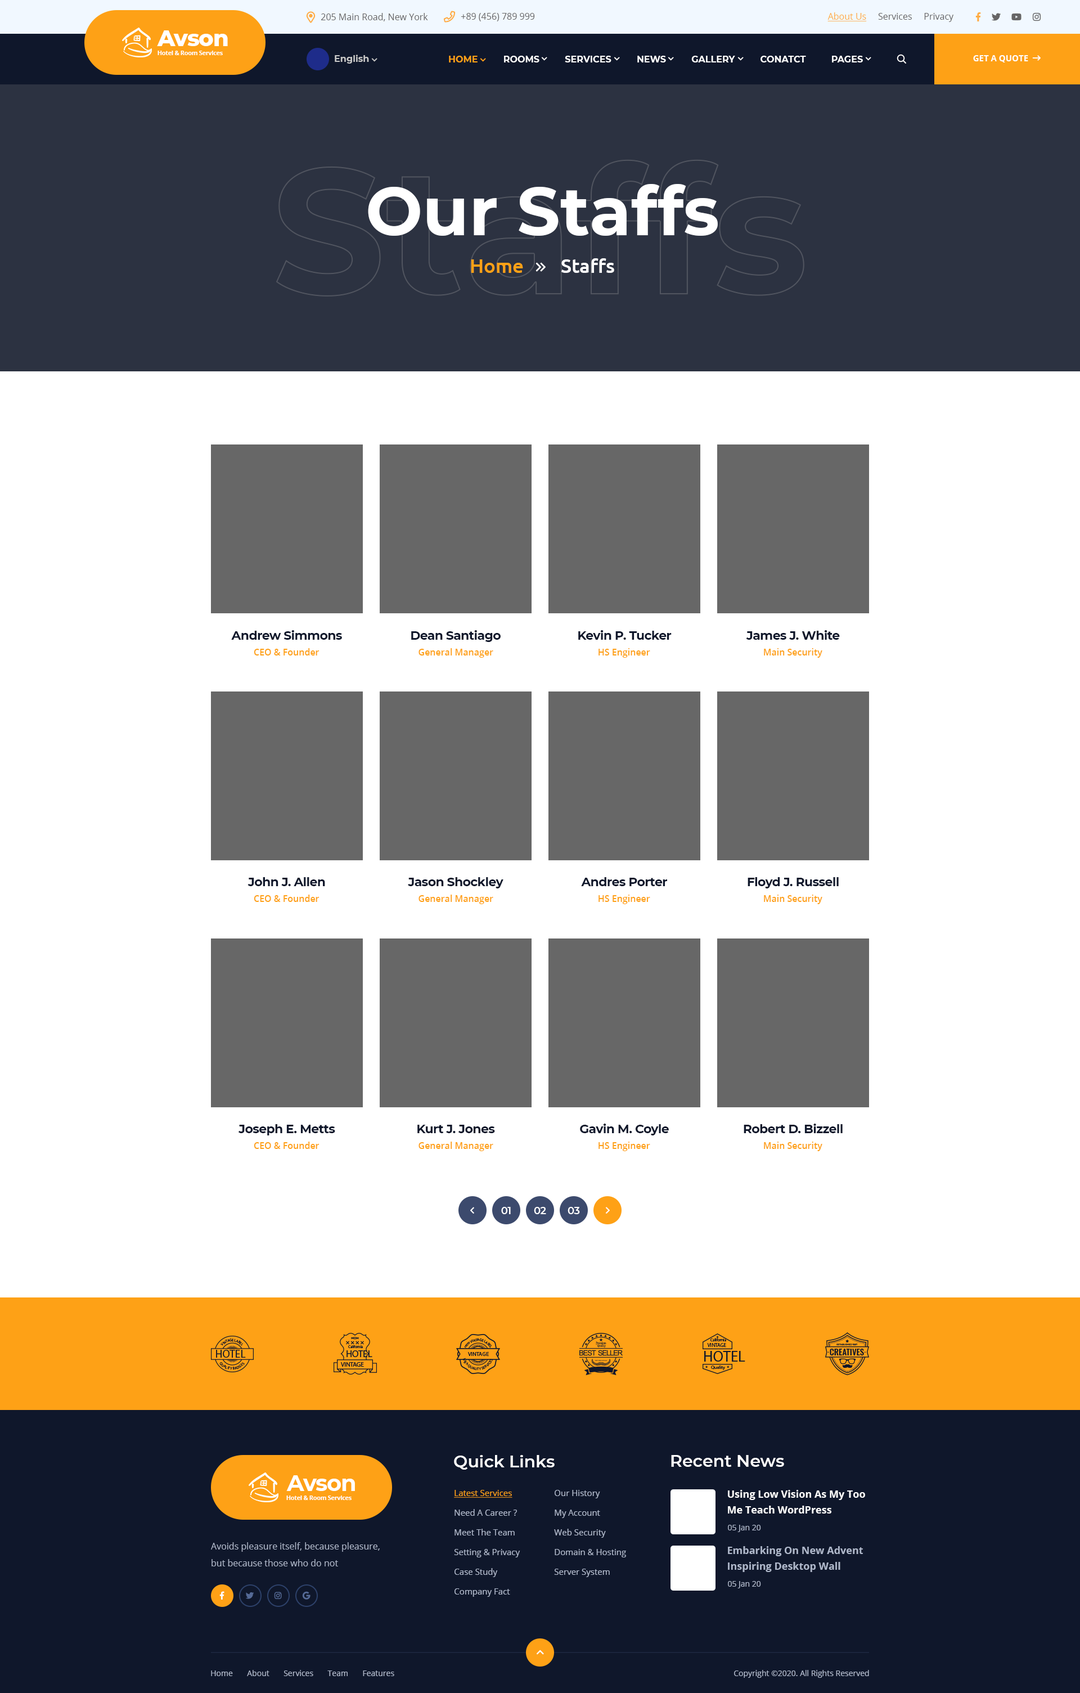
<style>
.page{position:relative;width:1080px;height:1693px;background:#ffffff}
.page>*{position:absolute;margin:0}
.t1{font:9px "OpenSans-Regular";color:#666565}
.t2{font:9px "OpenSans-Regular";color:#ffac41;text-decoration:underline}
.t3{font:22.5px "Montserrat-ExtraBold";letter-spacing:-0.03em;color:#ffffff}
.t4{font:6.2px "OpenSans-Bold";letter-spacing:-0.03em;color:#ffffff}
.t5{font:9px "Montserrat-Bold";color:#c8c8c8}
.t6{font:9px "Montserrat-Bold";color:#ffffff;text-transform:uppercase}
.t7{font:9px "Montserrat-Bold";color:#fea116;text-transform:uppercase}
.t8{font:8.4px "OpenSans-Bold";color:#ffffff;text-transform:uppercase}
.t9{font:67.5px "Montserrat-Bold";color:#ffffff}
.t10{font:19.7px "Ubuntu-Medium";color:#ffffff}
.t11{font:19.7px "Ubuntu-Medium";color:#fea116}
.t12{font:12.4px "Montserrat-Bold";letter-spacing:-0.03em;color:#0f172b}
.t13{font:9px "OpenSans-SemiBold";color:#fea116}
.t14{font:10.1px "Montserrat-SemiBold";letter-spacing:-0.03em;color:#ffffff}
.t15{font:16.9px "Montserrat-SemiBold";color:#ffffff}
.t16{font:22.5px "Montserrat-Bold";letter-spacing:-0.03em;color:#ffffff}
.t17{font:8.4px/19.7px "OpenSans-Regular";color:#aeb7ca}
.t18{font:8.4px/19.7px "OpenSans-Regular";color:#fea116;text-decoration:underline}
.t19{font:10.1px/15.8px "OpenSans-Bold";color:#ffffff}
.t20{font:7.9px "OpenSans-Regular";color:#aeb7ca}
.t21{font:9px/16.9px "OpenSans-Regular";color:#aeb7ca}
.t22{font:10.1px/15.8px "OpenSans-Bold";color:#aeb7ca}
</style>
<div class="page">
<p class="t1" style="left:321px;top:13px;width:107px;height:8px">205 Main Road, New York</p>
<p class="t1" style="left:461px;top:13px;width:74px;height:8px">+89 (456) 789 999</p>
<p class="t1" style="left:827px;top:12px;width:126px;height:10px"><span class="t2">About Us</span>     Services     Privacy</p>
<p class="t3" style="left:157px;top:30px;width:71px;height:16px">Avson</p>
<p class="t4" style="left:158px;top:51px;width:65px;height:4px">Hotel &amp; Room Services</p>
<p class="t5" style="left:335px;top:55px;width:34px;height:9px">English</p>
<p class="t6" style="left:449px;top:56px;width:414px;height:6px"><span class="t7">HOME</span>          Rooms          Services          News          gallery          Conatct          Pages</p>
<p class="t8" style="left:973px;top:55px;width:55px;height:7px">Get a quote</p>
<p class="t9" style="left:368px;top:184px;width:350px;height:52px">Our Staffs</p>
<p class="t10" style="left:471px;top:258px;width:143px;height:15px"><span class="t11">Home</span>        Staffs</p>
<p class="t12" style="left:231px;top:630px;width:111px;height:10px">Andrew Simmons</p>
<p class="t12" style="left:411px;top:630px;width:90px;height:12px">Dean Santiago</p>
<p class="t12" style="left:578px;top:630px;width:94px;height:10px">Kevin P. Tucker</p>
<p class="t12" style="left:746px;top:630px;width:94px;height:10px">James J. White</p>
<p class="t13" style="left:254px;top:648px;width:66px;height:7px">CEO &amp; Founder</p>
<p class="t13" style="left:418px;top:648px;width:75px;height:10px">General Manager</p>
<p class="t13" style="left:598px;top:648px;width:52px;height:10px">HS Engineer</p>
<p class="t13" style="left:764px;top:648px;width:58px;height:10px">Main Security</p>
<p class="t12" style="left:248px;top:877px;width:77px;height:9px">John J. Allen</p>
<p class="t12" style="left:408px;top:877px;width:95px;height:11px">Jason Shockley</p>
<p class="t12" style="left:581px;top:877px;width:86px;height:9px">Andres Porter</p>
<p class="t12" style="left:748px;top:877px;width:91px;height:11px">Floyd J. Russell</p>
<p class="t13" style="left:254px;top:894px;width:66px;height:8px">CEO &amp; Founder</p>
<p class="t13" style="left:418px;top:894px;width:75px;height:10px">General Manager</p>
<p class="t13" style="left:598px;top:894px;width:52px;height:10px">HS Engineer</p>
<p class="t13" style="left:764px;top:894px;width:58px;height:10px">Main Security</p>
<p class="t12" style="left:238px;top:1124px;width:97px;height:11px">Joseph E. Metts</p>
<p class="t12" style="left:417px;top:1124px;width:78px;height:9px">Kurt J. Jones</p>
<p class="t12" style="left:580px;top:1123px;width:89px;height:12px">Gavin M. Coyle</p>
<p class="t12" style="left:744px;top:1123px;width:99px;height:10px">Robert D. Bizzell</p>
<p class="t13" style="left:254px;top:1141px;width:66px;height:8px">CEO &amp; Founder</p>
<p class="t13" style="left:418px;top:1141px;width:75px;height:10px">General Manager</p>
<p class="t13" style="left:598px;top:1141px;width:52px;height:10px">HS Engineer</p>
<p class="t13" style="left:764px;top:1141px;width:58px;height:10px">Main Security</p>
<p class="t14" style="left:501px;top:1207px;width:10px;height:7px">01</p>
<p class="t14" style="left:534px;top:1207px;width:12px;height:7px">02</p>
<p class="t14" style="left:568px;top:1207px;width:12px;height:7px">03</p>
<p class="t15" style="left:454px;top:1455px;width:101px;height:14px">Quick Links</p>
<p class="t15" style="left:671px;top:1455px;width:113px;height:11px">Recent News</p>
<p class="t16" style="left:286px;top:1475px;width:69px;height:16px">Avson</p>
<p class="t17" style="left:454px;top:1490px;width:66px;height:106px"><span class="t18">Latest Services<br></span>Need A Career ?<br>Meet The Team<br>Setting &amp; Privacy<br>Case Study<br>Company Fact</p>
<p class="t17" style="left:554px;top:1490px;width:72px;height:87px">Our History<br>My Account<br>Web Security<br>Domain &amp; Hosting<br>Server System</p>
<p class="t19" style="left:728px;top:1490px;width:137px;height:23px">Using Low Vision As My Too<br>Me Teach WordPress</p>
<p class="t4" style="left:286px;top:1495px;width:66px;height:5px">Hotel &amp; Room Services</p>
<p class="t20" style="left:728px;top:1524px;width:33px;height:8px">05 Jan 20</p>
<p class="t21" style="left:211px;top:1542px;width:169px;height:24px">Avoids pleasure itself, because pleasure, <br>but because those who do not</p>
<p class="t22" style="left:728px;top:1546px;width:135px;height:26px">Embarking On New Advent<br>Inspiring Desktop Wall</p>
<p class="t20" style="left:728px;top:1581px;width:33px;height:7px">05 Jan 20</p>
<p class="t20" style="left:211px;top:1670px;width:183px;height:6px">Home       About       Services       Team       Features</p>
<p class="t20" style="left:734px;top:1670px;width:135px;height:7px">Copyright ©2020. All Rights Reserved</p>
</div>
